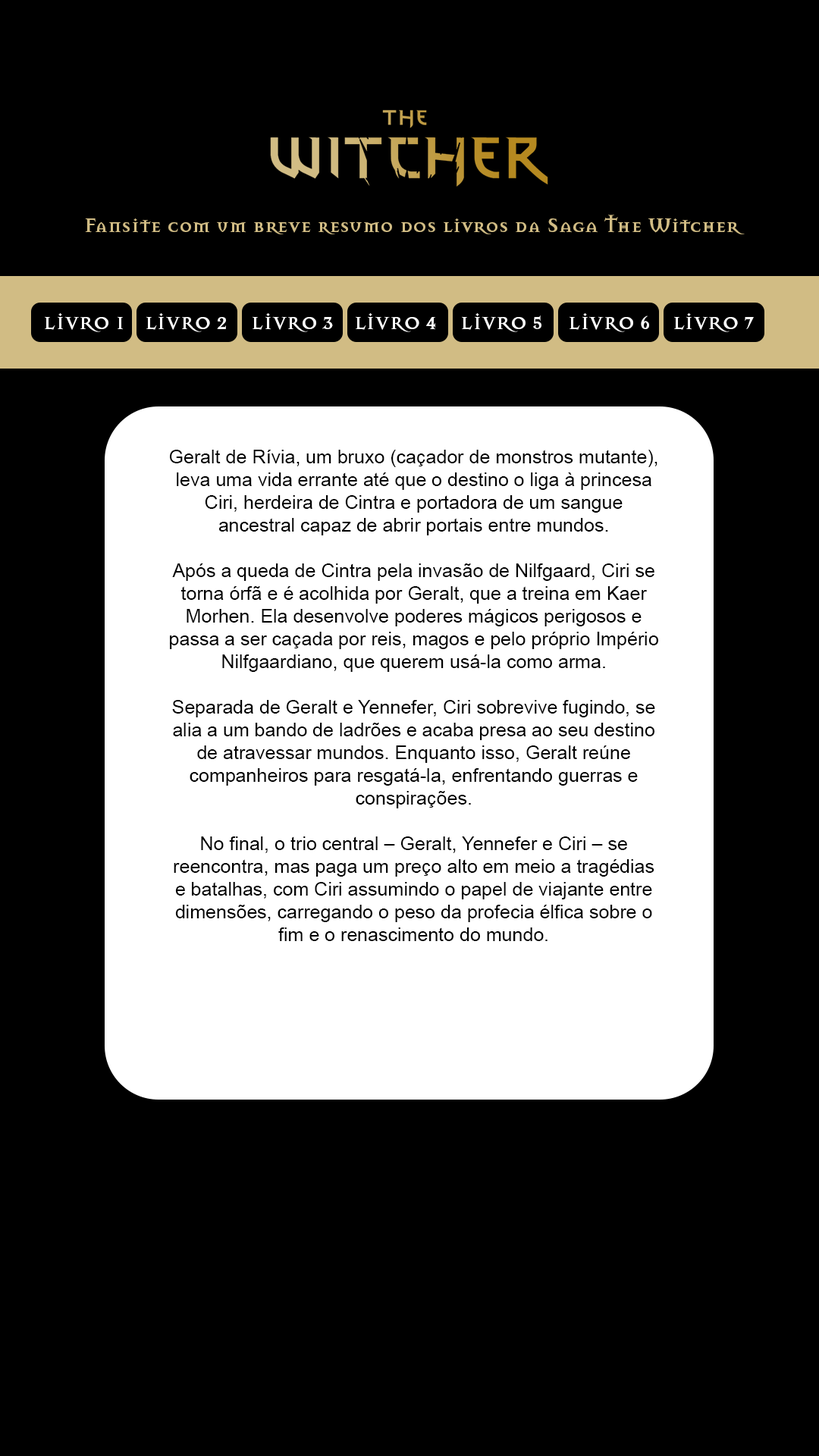
<style>
.page{position:relative;width:819px;height:1456px;background:#000000}
.page>*{position:absolute;margin:0}
.t1{font:21.2px "MasonSerifOT-Bold";color:#d1bc84}
.t2{font:19px "MasonSerifOT-Bold";color:#ffffff;text-transform:uppercase}
.t3{font:19px "ArialMT";color:#000000}
</style>
<div class="page">
<p class="t1" style="left:85px;top:215px;width:660px;height:19px">Fansite com um breve resumo dos livros da Saga The Witcher</p>
<p class="t2" style="left:45px;top:313px;width:78px;height:19px">livro 1</p>
<p class="t2" style="left:146px;top:313px;width:80px;height:19px">livro 2</p>
<p class="t2" style="left:253px;top:313px;width:80px;height:19px">livro 3</p>
<p class="t2" style="left:356px;top:313px;width:79px;height:19px">livro 4</p>
<p class="t2" style="left:462px;top:313px;width:79px;height:19px">livro 5</p>
<p class="t2" style="left:570px;top:313px;width:79px;height:19px">livro 6</p>
<p class="t2" style="left:674px;top:313px;width:80px;height:19px">livro 7</p>
<p class="t3" style="left:170px;top:450px;width:488px;height:491px;text-align:center">Geralt de Rívia, um bruxo (caçador de monstros mutante), leva uma vida errante até que o destino o liga à princesa Ciri, herdeira de Cintra e portadora de um sangue ancestral capaz de abrir portais entre mundos.<br><br>Após a queda de Cintra pela invasão de Nilfgaard, Ciri se torna órfã e é acolhida por Geralt, que a treina em Kaer Morhen. Ela desenvolve poderes mágicos perigosos e passa a ser caçada por reis, magos e pelo próprio Império Nilfgaardiano, que querem usá-la como arma.<br><br>Separada de Geralt e Yennefer, Ciri sobrevive fugindo, se alia a um bando de ladrões e acaba presa ao seu destino de atravessar mundos. Enquanto isso, Geralt reúne companheiros para resgatá-la, enfrentando guerras e conspirações.<br><br>No final, o trio central – Geralt, Yennefer e Ciri – se reencontra, mas paga um preço alto em meio a tragédias e batalhas, com Ciri assumindo o papel de viajante entre dimensões, carregando o peso da profecia élfica sobre o fim e o renascimento do mundo.</p>
</div>
